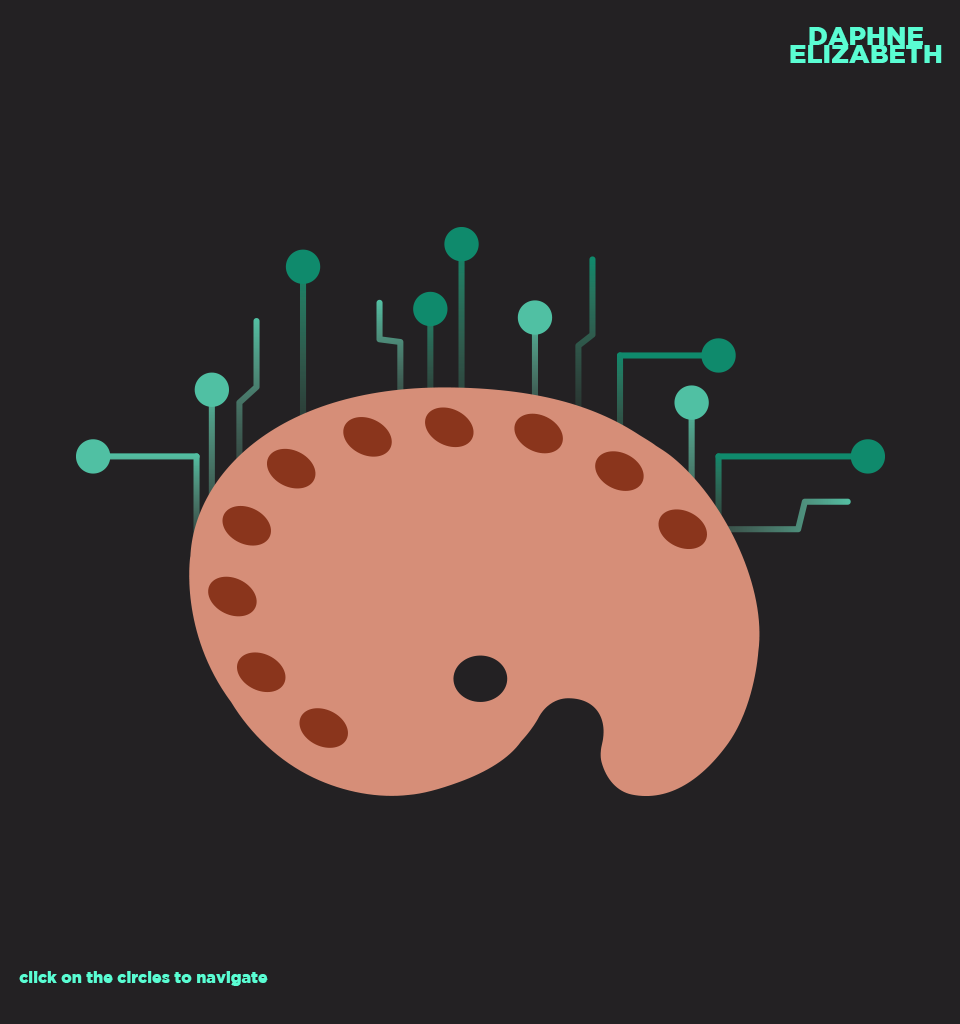
<style>
.page{position:relative;width:960px;height:1024px;background:#232123}
.page>*{position:absolute;margin:0}
.t1{font:26px/18px "GothamBlack";color:#5afdd3}
.t2{font:16px "GothamBlack";color:#5afdd3}
</style>
<div class="page">
<p class="t1" style="left:790px;top:27px;width:152px;height:36px;text-align:center">DAPHNE<br>ELIZABETH</p>
<p class="t2" style="left:19px;top:971px;width:249px;height:15px">click on the circles to navigate</p>
</div>
